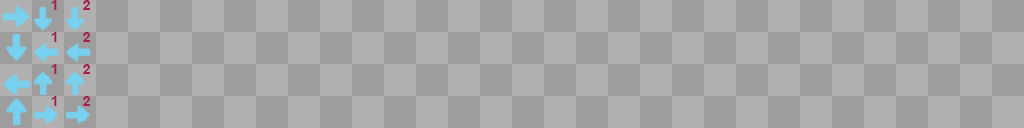
<style>
.page{position:relative;width:1024px;height:128px;background:#9d9d9d}
.page>*{position:absolute;margin:0}
.t1{font:14px "Arial-BoldMT";color:#a11d53}
</style>
<div class="page">
<p class="t1" style="left:51px;top:0px;width:6px;height:10px">1</p>
<p class="t1" style="left:83px;top:0px;width:7px;height:10px">2</p>
<p class="t1" style="left:51px;top:32px;width:6px;height:10px">1</p>
<p class="t1" style="left:83px;top:32px;width:7px;height:10px">2</p>
<p class="t1" style="left:51px;top:64px;width:6px;height:10px">1</p>
<p class="t1" style="left:83px;top:64px;width:7px;height:10px">2</p>
<p class="t1" style="left:51px;top:96px;width:6px;height:10px">1</p>
<p class="t1" style="left:83px;top:96px;width:7px;height:10px">2</p>
</div>
